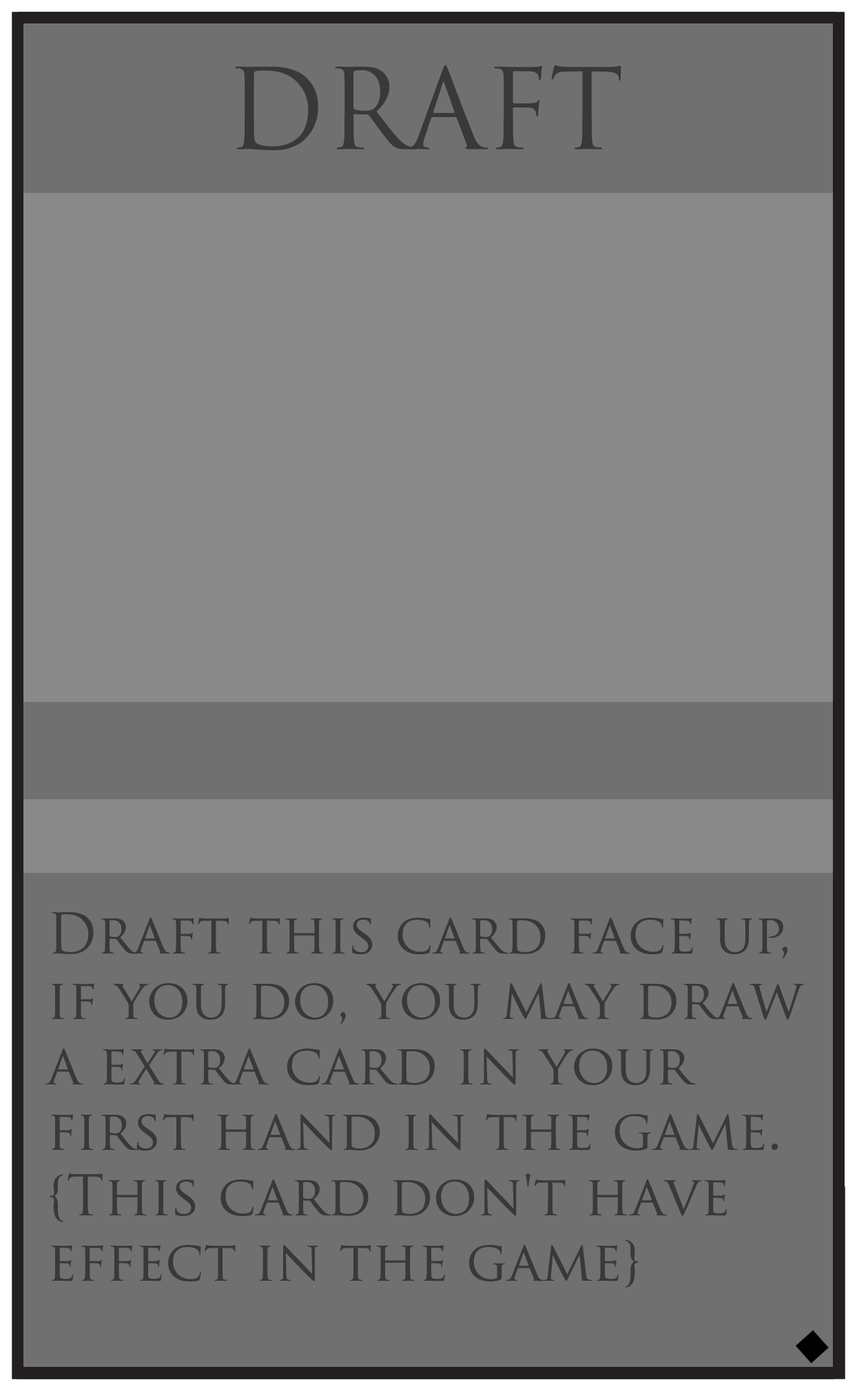
<style>
.page{position:relative;width:857px;height:1391px;background:#707070}
.page>*{position:absolute;margin:0}
.t1{font:109.1px "TrajanPro-Regular";color:#393939}
.t2{font:54.5px "TrajanPro-Regular";color:#393939}
</style>
<div class="page">
<p class="t1" style="left:235px;top:65px;width:387px;height:85px">DRAFT</p>
<p class="t2" style="left:45px;top:912px;width:759px;height:376px">Draft this card face up, <br>if you do, you may draw <br>a extra card in your <br>first hand in the game. <br>{This card don't have  <br>effect in the game}</p>
</div>
